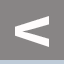
<style>
.page{position:relative;width:64px;height:64px;background:#888585}
.page>*{position:absolute;margin:0}
.t1{font:50px "MyriadPro-Bold";color:#fffcfc}
</style>
<div class="page">
<p class="t1" style="left:15px;top:16px;width:34px;height:31px;rotate:90deg">V</p>
</div>
